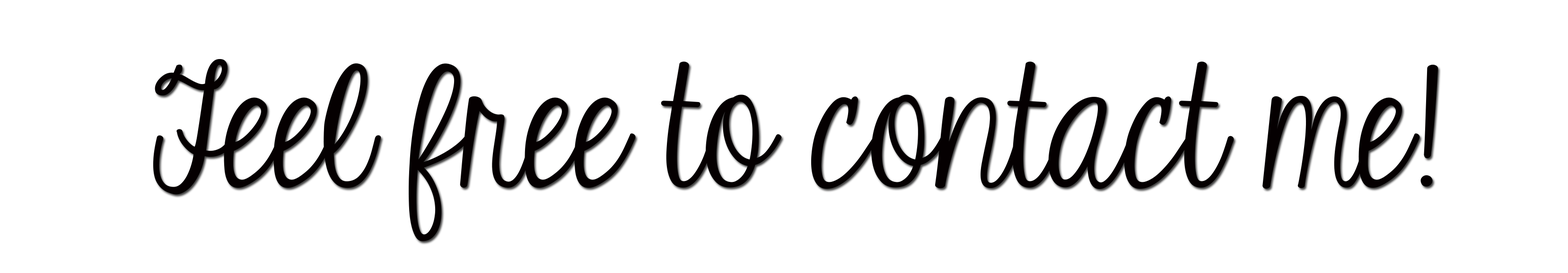
<style>
.page{position:relative;width:1568px;height:273px;background:#ffffff}
.page>*{position:absolute;margin:0}
.t1{font:177.4px "KGEyesWideOpen";color:#050001}
</style>
<div class="page">
<p class="t1" style="left:153px;top:59px;width:1285px;height:183px">Feel free to contact me!</p>
</div>
